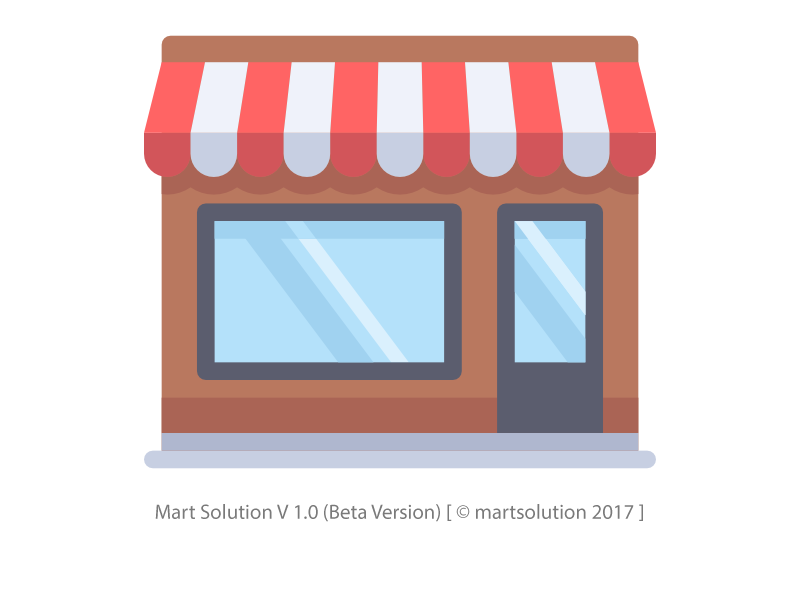
<style>
.page{position:relative;width:800px;height:600px;background:#ffffff}
.page>*{position:absolute;margin:0}
.t1{font:20.8px "MyriadPro-Regular";color:#7a7a7a}
</style>
<div class="page">
<p class="t1" style="left:155px;top:504px;width:488px;height:18px">Mart Solution V 1.0 (Beta Version) [ © martsolution 2017 ]</p>
</div>
